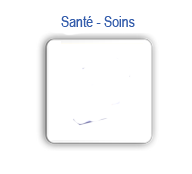
<style>
.page{position:relative;width:192px;height:174px;background:#ffffff}
.page>*{position:absolute;margin:0}
.t1{font:15px "ArialNarrow";color:#335cab}
</style>
<div class="page">
<p class="t1" style="left:61px;top:16px;width:74px;height:11px">Santé - Soins</p>
</div>
